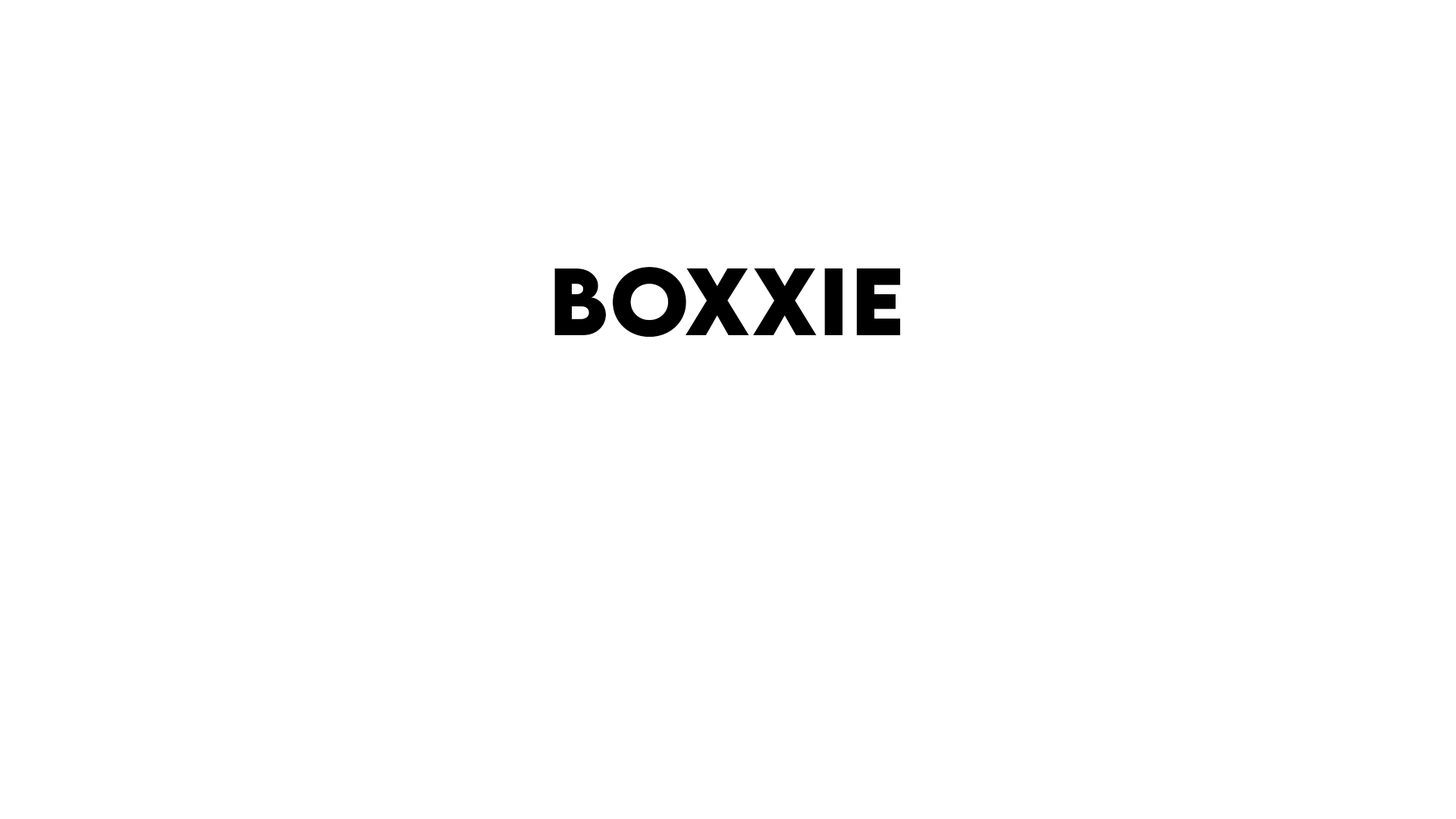
<style>
.page{position:relative;width:1456px;height:819px;background:#ffffff}
.page>*{position:absolute;margin:0}
.t1{font:85px "LEMONMILK-Bold";letter-spacing:0.025em;color:#000000}
</style>
<div class="page">
<p class="t1" style="left:554px;top:267px;width:347px;height:70px">BOXXIE</p>
</div>
